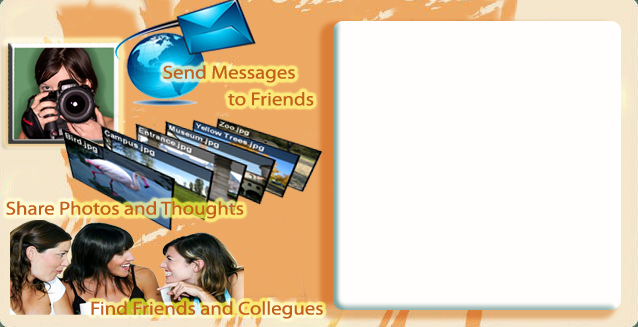
<style>
.page{position:relative;width:638px;height:327px;background:#fffefc}
.page>*{position:absolute;margin:0}
.t1{font:18.7px "MyriadPro-Regular";color:#c35f1d;scale:1.12 1}
</style>
<div class="page">
<p class="t1" style="left:163px;top:65px;width:132px;height:18px">Send Messages</p>
<p class="t1" style="left:228px;top:92px;width:86px;height:14px">to Friends</p>
<p class="t1" style="left:6px;top:201px;width:238px;height:18px">Share Photos and Thoughts</p>
<p class="t1" style="left:91px;top:301px;width:232px;height:18px">Find Friends and Collegues</p>
</div>
